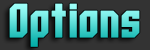
<style>
.page{position:relative;width:150px;height:50px;background:#333333}
.page>*{position:absolute;margin:0}
.t1{font:47.9px "Whitestone-Bold"}
</style>
<div class="page">
<p class="t1" style="left:9px;top:3px;width:131px;height:44px">Options</p>
</div>
